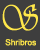
<style>
.page{position:relative;width:40px;height:50px;background:#3e3e3e}
.page>*{position:absolute;margin:0}
.t1{font:37.3px "Vivaldii";color:#ffe84a;scale:0.86 1}
.t2{font:8.3px "ArialMT";color:#ffe84a}
</style>
<div class="page">
<p class="t1" style="left:2px;top:4px;width:36px;height:27px">S</p>
<p class="t2" style="left:5px;top:39px;width:31px;height:7px">Shribros</p>
</div>
